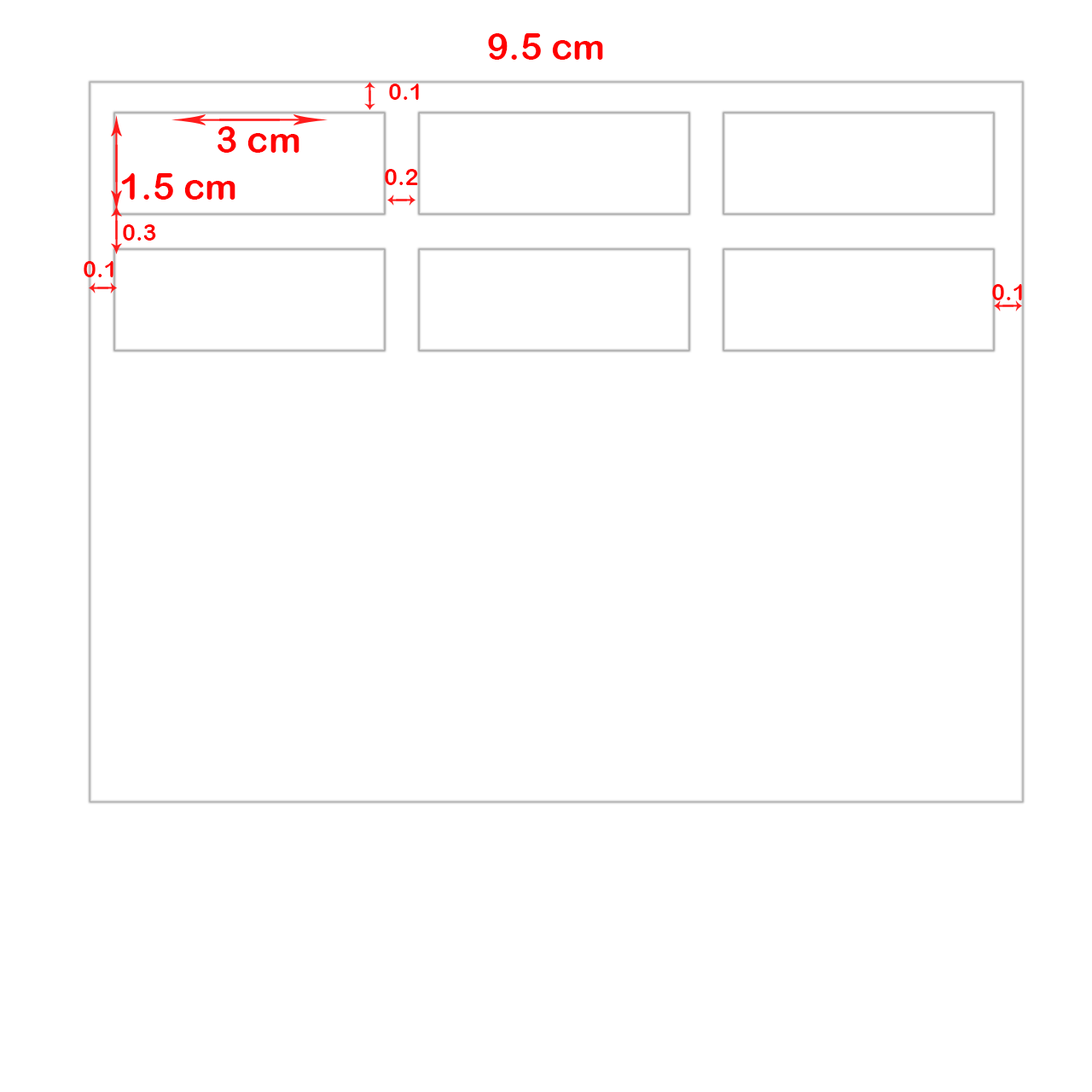
<style>
.page{position:relative;width:1092px;height:1092px;background:#ffffff}
.page>*{position:absolute;margin:0}
.t1{font:36.4px "ArialRoundedMTBold";color:#ff0000}
.t2{font:22.9px "ArialRoundedMTBold";color:#ff0000}
</style>
<div class="page">
<p class="t1" style="left:488px;top:33px;width:115px;height:27px">9.5 cm</p>
<p class="t2" style="left:389px;top:84px;width:30px;height:16px">0.1</p>
<p class="t1" style="left:218px;top:126px;width:81px;height:27px">3 cm</p>
<p class="t1" style="left:121px;top:173px;width:114px;height:27px">1.5 cm</p>
<p class="t2" style="left:385px;top:169px;width:33px;height:16px">0.2</p>
<p class="t2" style="left:123px;top:224px;width:33px;height:17px">0.3</p>
<p class="t2" style="left:84px;top:261px;width:29px;height:16px">0.1</p>
<p class="t2" style="left:992px;top:284px;width:30px;height:16px">0.1</p>
</div>
